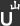
<style>
.page{position:relative;width:20px;height:26px;background:#333333}
.page>*{position:absolute;margin:0}
.t1{font:12px "DFKaiShu-SB-Estd-BF";color:#ffffff;font-weight:bold}
.t2{font:18px "ArialMT";color:#ffffff;font-weight:bold}
</style>
<div class="page">
<p class="t1" style="left:10px;top:0px;width:10px;height:10px">山</p>
<p class="t2" style="left:1px;top:12px;width:11px;height:14px">U</p>
</div>
